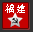
<style>
.page{position:relative;width:33px;height:32px;background:#c50000}
.page>*{position:absolute;margin:0}
.t1{font:10.4px "SimSun";color:#ffffff}
</style>
<div class="page">
<p class="t1" style="left:5px;top:4px;width:20px;height:9px">福建</p>
</div>
